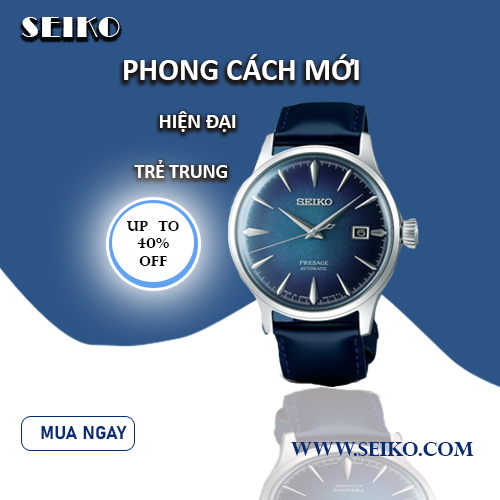
<style>
.page{position:relative;width:500px;height:500px;background:#2c5486}
.page>*{position:absolute;margin:0}
.t1{font:28.7px "Broadway";letter-spacing:0.075em;color:#ffffff}
.t2{font:31px "Calibri-Bold";color:#ffffff}
.t3{font:20.8px "Calibri-Bold";color:#ffffff}
.t4{font:19.6px "Calibri-Bold";color:#ffffff}
.t5{font:14.4px "PerpetuaTitlingMT-Bold";color:#010101}
.t6{font:18.2px "Bahnschrift-Bold";color:#072c77}
.t7{font:20.2px "PerpetuaTitlingMT-Bold";color:#072c77}
</style>
<div class="page">
<p class="t1" style="left:22px;top:17px;width:98px;height:20px">SEIKO</p>
<p class="t2" style="left:124px;top:54px;width:235px;height:26px">PHONG CÁCH MỚI</p>
<p class="t3" style="left:160px;top:111px;width:76px;height:21px">HIỆN ĐẠI</p>
<p class="t4" style="left:134px;top:160px;width:93px;height:18px">TRẺ TRUNG</p>
<p class="t5" style="left:127px;top:221px;width:52px;height:45px;text-align:center">UP  TO<br>40%<br>off</p>
<p class="t6" style="left:41px;top:425px;width:86px;height:15px">MUA NGAY</p>
<p class="t7" style="left:290px;top:442px;width:184px;height:14px">WWW.SEIKO.COM</p>
</div>
